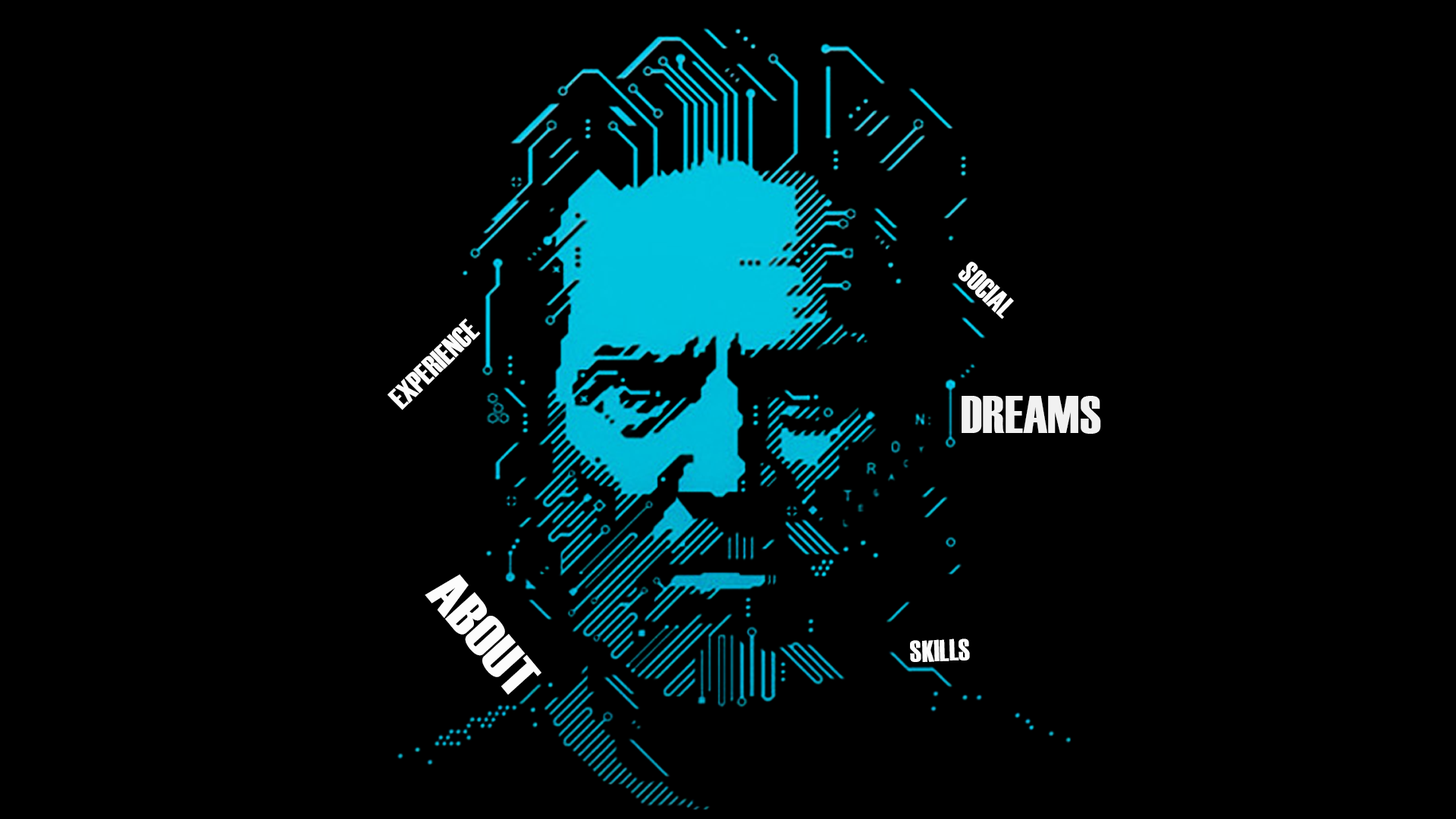
<style>
.page{position:relative;width:1456px;height:819px;background:#000000}
.page>*{position:absolute;margin:0}
.t1{font:30.3px "Haettenschweiler";color:#fcfcfc}
.t2{font:30.3px "Haettenschweiler";color:#fcfcfc;scale:1.03 1}
.t3{font:53px "Haettenschweiler";color:#f1f1f1;scale:1.06 1}
.t4{font:56.8px "Haettenschweiler";color:#fcfcfc;scale:1.24 1}
</style>
<div class="page">
<p class="t1" style="left:958px;top:262px;width:56px;height:57px;rotate:44deg">SOCIAL</p>
<p class="t2" style="left:388px;top:318px;width:93px;height:92px;rotate:-45deg">EXPERIENCE</p>
<p class="t3" style="left:962px;top:396px;width:139px;height:38px">DREAMS</p>
<p class="t4" style="left:425px;top:574px;width:116px;height:121px;rotate:50deg">ABOUT</p>
<p class="t1" style="left:910px;top:639px;width:60px;height:23px;rotate:-2deg">SKILLS</p>
</div>
